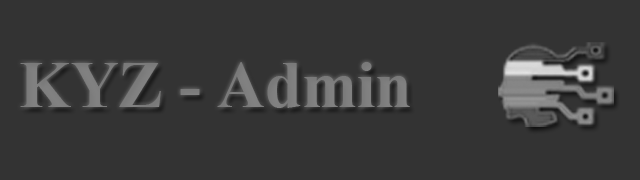
<style>
.page{position:relative;width:640px;height:180px;background:#333333}
.page>*{position:absolute;margin:0}
.t1{font:66px "TimesNewRomanPS-BoldMT";color:#7e7e7e}
</style>
<div class="page">
<p class="t1" style="left:20px;top:62px;width:390px;height:46px">KYZ - Admin</p>
</div>
